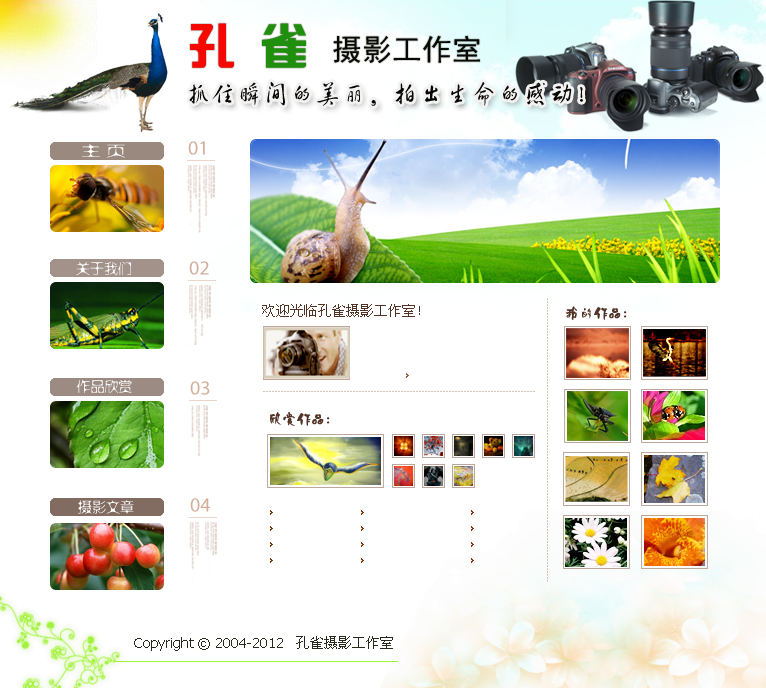
<style>
.page{position:relative;width:766px;height:688px;background:#ffffff}
.page>*{position:absolute;margin:0}
.t1{font:30px "SimHei";color:#050b03}
.t2{font:48px "¹ã½Ý¾ÓÃÔÄã×Ö¿â";color:#f60700}
.t3{font:48px "¹ã½Ý¾ÓÃÔÄã×Ö¿â";color:#1f8f0d}
.t4{font:26px "FZHCJW--GB1-0";color:#070502}
.t5{font:14px "FZXSHJW--GB1-0";color:#ffffff;scale:1.38 1}
.t6{font:14px "FZXSHJW--GB1-0";color:#ffffff}
.t7{font:14px "NSimSun";color:#513224}
.t8{font:14px "Ò¶¸ùÓÑ·ç·«¼òÌå";color:#513224}
.t9{font:14px "Tahoma";color:#262a1c}
.t10{font:14px "SimSun";color:#262a1c}
</style>
<div class="page">
<p class="t1" style="left:190px;top:23px;width:290px;height:45px"><span class="t2">孔 </span><span class="t3">雀 </span>摄影工作室</p>
<p class="t4" style="left:189px;top:82px;width:394px;height:24px">抓住瞬间的美丽，拍出生命的感动！</p>
<p class="t5" style="left:82px;top:144px;width:43px;height:14px">主 页</p>
<p class="t6" style="left:76px;top:261px;width:55px;height:15px">关于我们</p>
<p class="t7" style="left:262px;top:304px;width:158px;height:13px">欢迎光临孔雀摄影工作室！</p>
<p class="t8" style="left:565px;top:306px;width:62px;height:14px">我的作品：</p>
<p class="t6" style="left:76px;top:379px;width:56px;height:15px">作品欣赏</p>
<p class="t8" style="left:270px;top:412px;width:60px;height:14px">欣赏作品：</p>
<p class="t6" style="left:78px;top:500px;width:56px;height:14px">摄影文章</p>
<p class="t9" style="left:134px;top:636px;width:259px;height:15px">Copyright © 2004-2012   <span class="t10">孔雀摄影工作室</span></p>
</div>
